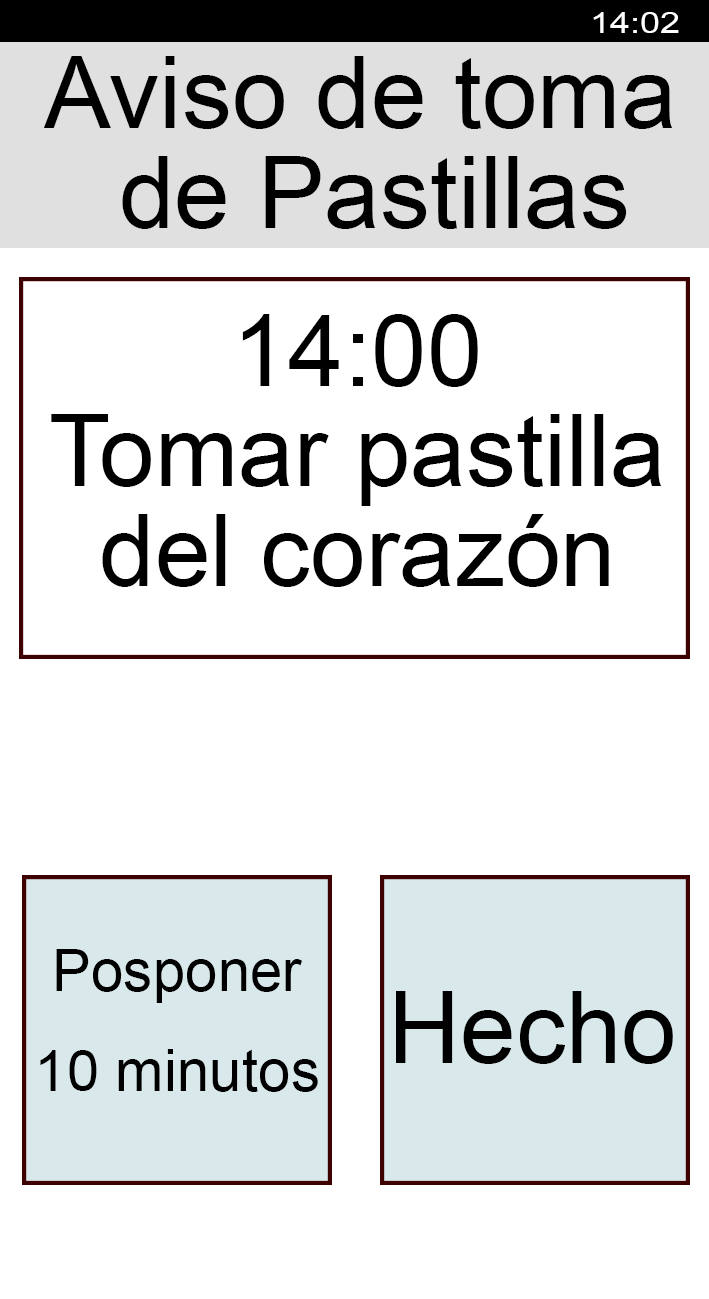
<style>
.page{position:relative;width:709px;height:1299px;background:#ffffff}
.page>*{position:absolute;margin:0}
.t1{font:29.2px "ArialMT";color:#ffffff;scale:1.22 1}
.t2{font:100px/100px "ArialMT";color:#000000}
.t3{font:58.3px/100px "ArialMT";color:#000000}
.t4{font:100px "ArialMT";color:#000000}
</style>
<div class="page">
<p class="t1" style="left:593px;top:12px;width:86px;height:21px">14:02</p>
<p class="t2" style="left:43px;top:56px;width:630px;height:173px;text-align:center">Aviso de toma <br>de Pastillas</p>
<p class="t2" style="left:51px;top:314px;width:611px;height:273px;text-align:center">14:00<br>Tomar pastilla<br>del corazón</p>
<p class="t3" style="left:40px;top:949px;width:278px;height:143px;text-align:center">Posponer<br>10 minutos</p>
<p class="t4" style="left:396px;top:991px;width:277px;height:73px">Hecho</p>
</div>
